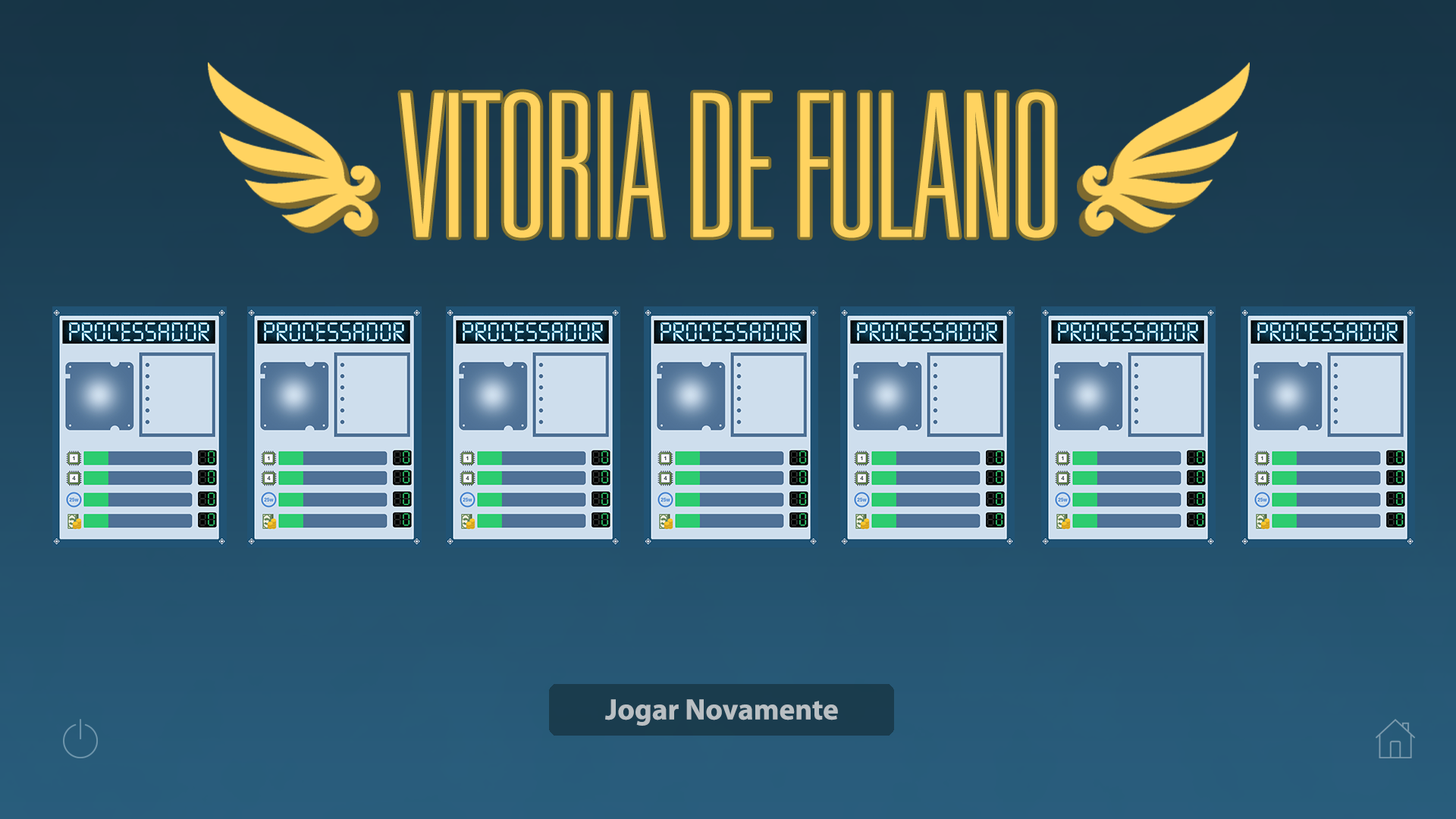
<style>
.page{position:relative;width:1456px;height:819px}
.page>*{position:absolute;margin:0}
.t1{font:199.2px "UniversalAccreditation";color:#ffd360}
.t2{font:29.6px "MyriadPro-Bold";color:#b9bfc3}
</style>
<div class="page">
<p class="t1" style="left:400px;top:92px;width:655px;height:146px">VITORIA DE FULANO</p>
<p class="t2" style="left:605px;top:699px;width:233px;height:27px">Jogar Novamente</p>
</div>
